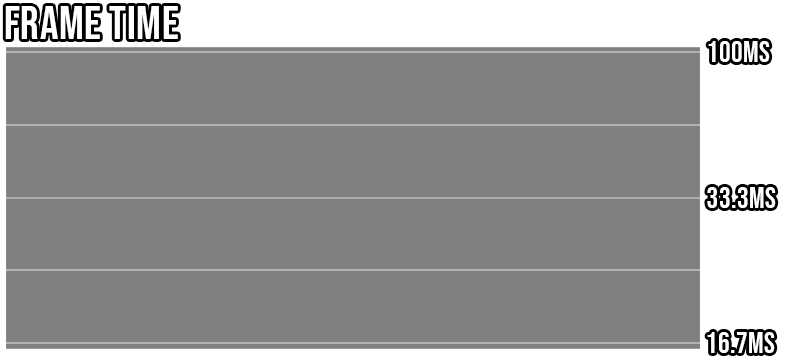
<style>
.page{position:relative;width:800px;height:360px;background:#7f7f7f}
.page>*{position:absolute;margin:0}
.t1{font:46.1px "BebasNeue-Regular";letter-spacing:0.014em;color:#ffffff}
.t2{font:29.3px "BebasNeue-Regular";letter-spacing:0.014em;color:#ffffff}
</style>
<div class="page">
<p class="t1" style="left:5px;top:6px;width:173px;height:33px">FRAME TIME</p>
<p class="t2" style="left:708px;top:41px;width:62px;height:21px">100MS</p>
<p class="t2" style="left:707px;top:187px;width:69px;height:21px">33.3MS</p>
<p class="t2" style="left:707px;top:332px;width:68px;height:21px">16.7MS</p>
</div>
